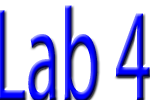
<style>
.page{position:relative;width:150px;height:100px;background:#ffffff}
.page>*{position:absolute;margin:0}
.t1{font:133.1px "MyriadPro-Regular";scale:0.53 1}
</style>
<div class="page">
<p class="t1" style="left:0px;top:5px;width:150px;height:97px">Lab 4</p>
</div>
